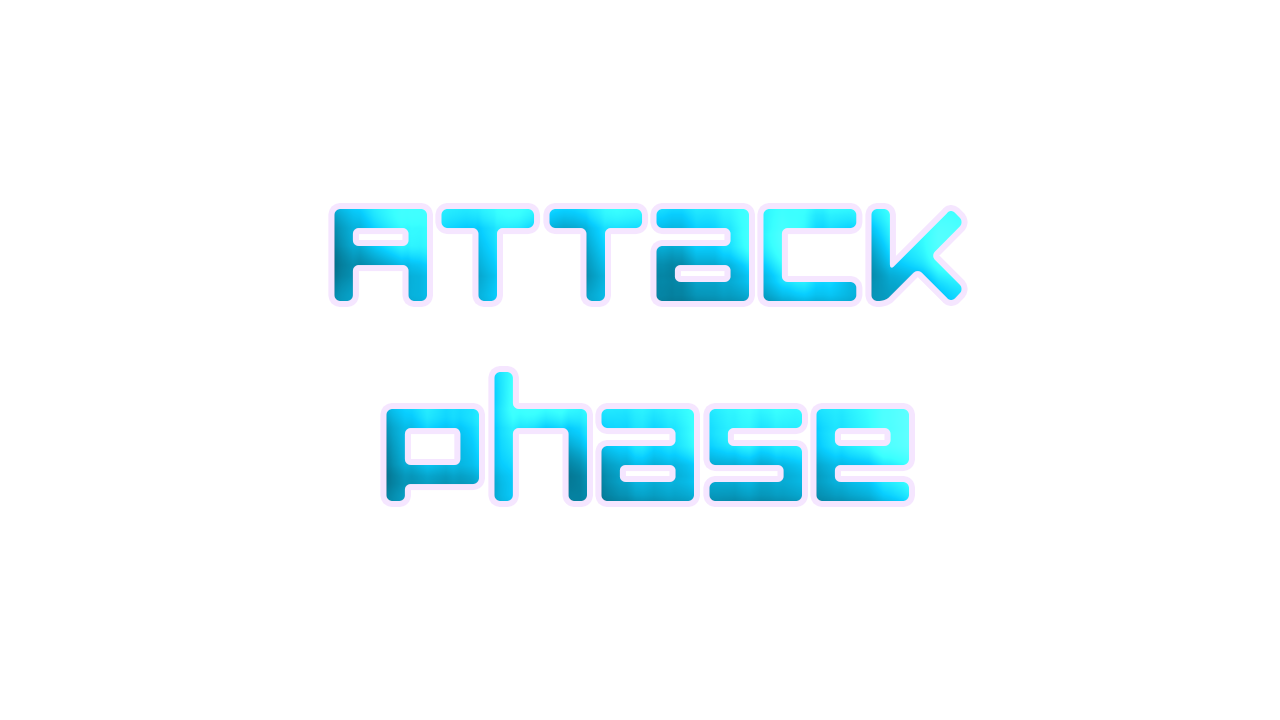
<style>
.page{position:relative;width:1280px;height:720px;background:#ffffff}
.page>*{position:absolute;margin:0}
.t1{font:166.7px "LuggageRoundRegular"}
</style>
<div class="page">
<p class="t1" style="left:334px;top:209px;width:628px;height:292px;text-align:center">Attack<br>Phase</p>
</div>
